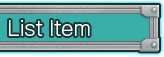
<style>
.page{position:relative;width:164px;height:57px}
.page>*{position:absolute;margin:0}
.t1{font:20px "GothicMB101Pro-Light";color:#fbfbf9}
</style>
<div class="page">
<p class="t1" style="left:9px;top:20px;width:81px;height:16px">List Item</p>
</div>
